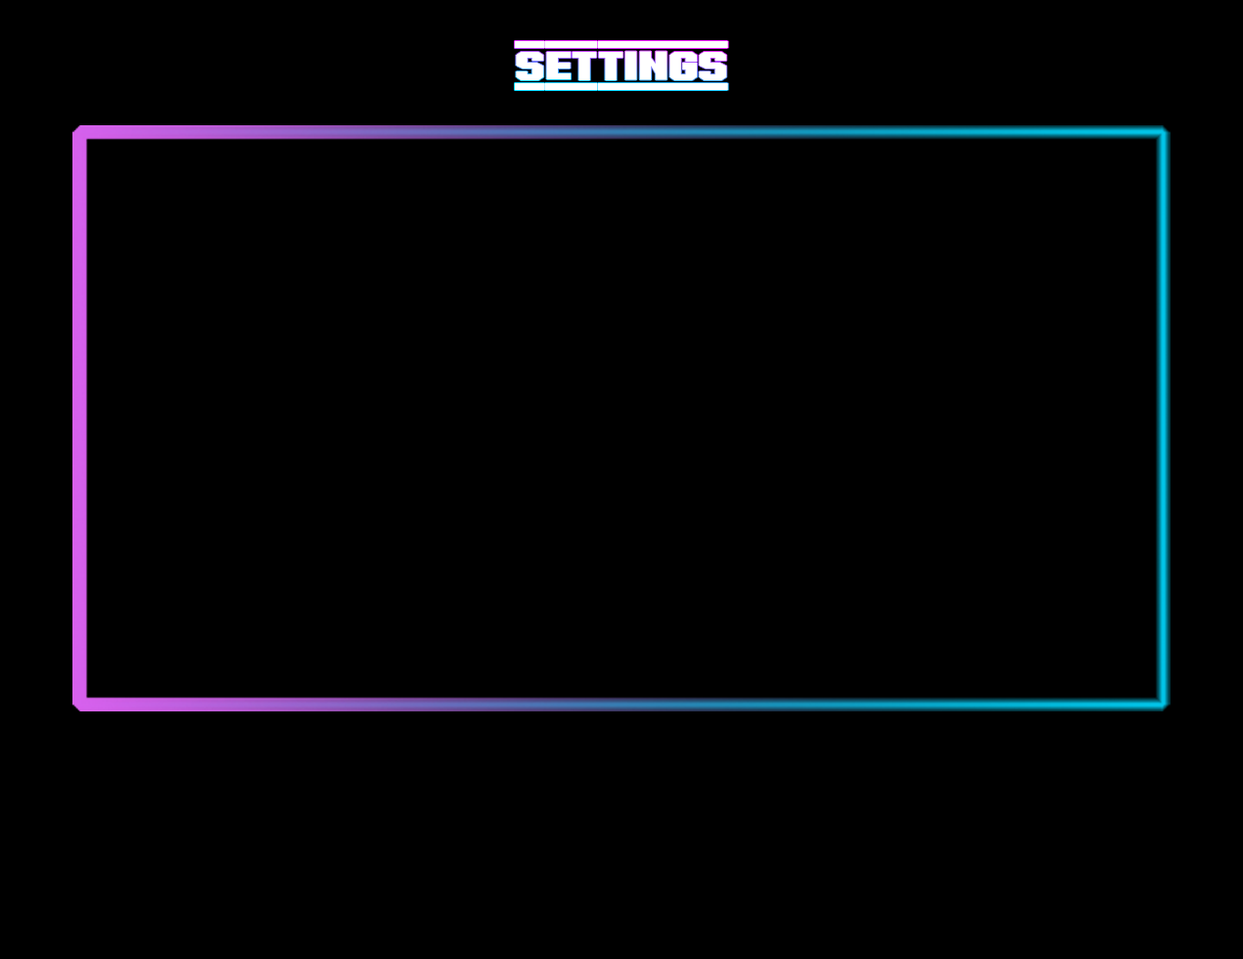
<style>
.page{position:relative;width:1243px;height:959px;background:#000000}
.page>*{position:absolute;margin:0}
.t1{font:70.5px "SpeedRacing-Regular";color:#ffffff}
</style>
<div class="page">
<p class="t1" style="left:515px;top:41px;width:213px;height:49px">SETTINGS</p>
</div>
